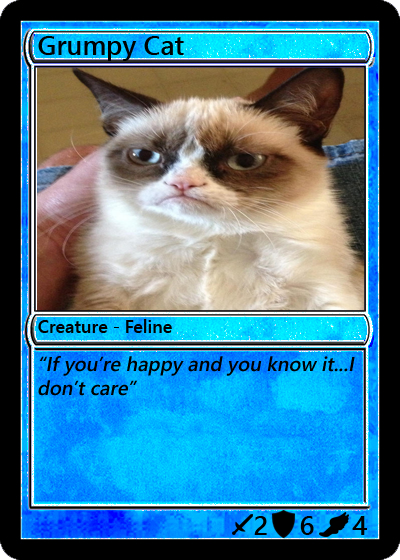
<style>
.page{position:relative;width:400px;height:560px}
.page>*{position:absolute;margin:0}
.t1{font:27px "YuGothicUI-Semibold";color:#000000}
.t2{font:18px "YuGothicUI-Semibold";color:#000000}
.t3{font:20px "YuGothicUI-Semibold";color:#000000;font-style:italic}
</style>
<div class="page">
<p class="t1" style="left:38px;top:36px;width:146px;height:25px">Grumpy Cat</p>
<p class="t2" style="left:38px;top:319px;width:134px;height:14px">Creature - Feline</p>
<p class="t3" style="left:38px;top:356px;width:317px;height:40px">“If you’re happy and you know it...I don’t care”</p>
<p class="t1" style="left:254px;top:516px;width:13px;height:19px">2</p>
<p class="t1" style="left:300px;top:516px;width:14px;height:19px">6</p>
<p class="t1" style="left:352px;top:516px;width:15px;height:19px">4</p>
</div>
